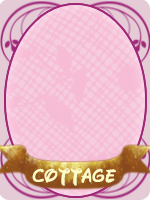
<style>
.page{position:relative;width:150px;height:200px}
.page>*{position:absolute;margin:0}
.t1{font:37.4px "Waltograph";color:#fcfac7}
</style>
<div class="page">
<p class="t1" style="left:32px;top:167px;width:85px;height:19px">cottage</p>
</div>
